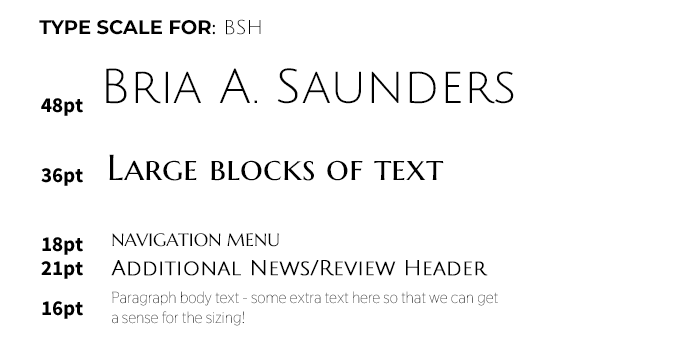
<style>
.page{position:relative;width:680px;height:356px;background:#ffffff}
.page>*{position:absolute;margin:0}
.t1{font:19.5px "Montserrat-Bold";color:#000000;text-transform:uppercase}
.t2{font:19.5px "SourceSansPro-Regular";color:#000000}
.t3{font:19.5px "JuliusSansOne-Regular";color:#000000}
.t4{font:48px "JuliusSansOne-Regular";color:#000000}
.t5{font:21px "SourceSansPro-Bold";color:#000000}
.t6{font:36px "MarcellusSC-Regular";color:#000000}
.t7{font:18px "MarcellusSC-Regular";color:#000000}
.t8{font:21px "JuliusSansOne-Regular";color:#000000;font-weight:bold}
.t9{font:16px/19.5px "Thasadith-Regular";color:#000000}
</style>
<div class="page">
<p class="t1" style="left:39px;top:19px;width:222px;height:16px">TYPE SCALE for<span class="t2">:</span><span class="t3"> BSH</span></p>
<p class="t4" style="left:106px;top:68px;width:408px;height:36px">Bria A. Saunders</p>
<p class="t5" style="left:41px;top:98px;width:42px;height:18px">48pt</p>
<p class="t6" style="left:109px;top:154px;width:335px;height:27px">Large blocks of text</p>
<p class="t5" style="left:41px;top:168px;width:42px;height:18px">36pt</p>
<p class="t7" style="left:112px;top:233px;width:167px;height:14px">NAVIGATION MENU</p>
<p class="t5" style="left:42px;top:237px;width:41px;height:18px">18pt</p>
<p class="t5" style="left:41px;top:261px;width:42px;height:18px">21pt</p>
<p class="t8" style="left:111px;top:260px;width:377px;height:16px">Additional News/Review Header</p>
<p class="t9" style="left:112px;top:291px;width:386px;height:35px">Paragraph body text - some extra text here so that we can get a sense for the sizing!</p>
<p class="t5" style="left:42px;top:301px;width:41px;height:18px">16pt</p>
</div>
